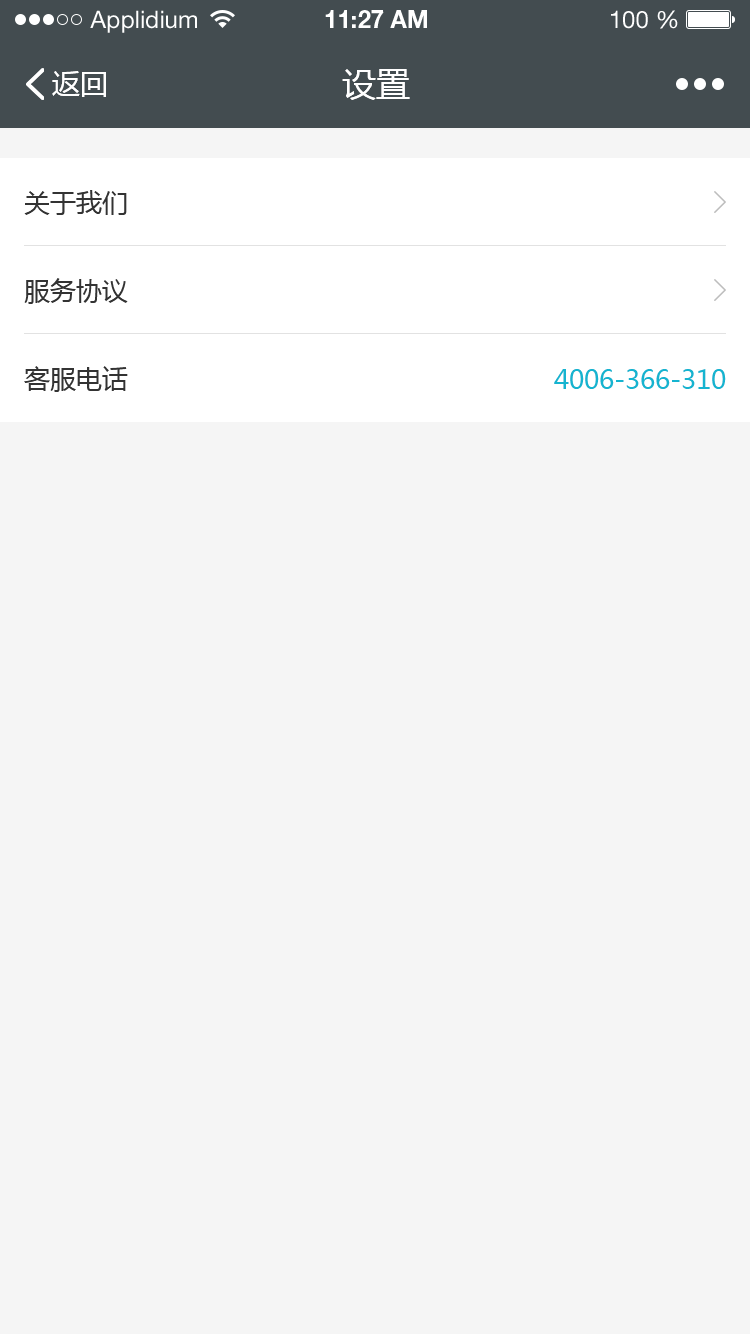
<style>
.page{position:relative;width:750px;height:1334px;background:#f5f5f5}
.page>*{position:absolute;margin:0}
.t1{font:24px "HelveticaNeueLTStd-Roman";color:#ffffff}
.t2{font:24px "HelveticaNeueLTStd-Bd";color:#ffffff}
.t3{font:28px "MicrosoftYaHei";color:#ffffff}
.t4{font:34px "MicrosoftYaHei";color:#ffffff}
.t5{font:26px "MicrosoftYaHei";color:#333333}
.t6{font:26px "MicrosoftYaHei";color:#15b4d0}
</style>
<div class="page">
<p class="t1" style="left:90px;top:10px;width:107px;height:23px">Applidium</p>
<p class="t2" style="left:325px;top:10px;width:102px;height:18px">11:27 AM</p>
<p class="t1" style="left:611px;top:10px;width:67px;height:19px">100 %</p>
<p class="t3" style="left:52px;top:71px;width:54px;height:26px">返回</p>
<p class="t4" style="left:342px;top:69px;width:68px;height:31px">设置</p>
<p class="t5" style="left:24px;top:190px;width:103px;height:25px">关于我们</p>
<p class="t5" style="left:24px;top:278px;width:104px;height:26px">服务协议</p>
<p class="t5" style="left:24px;top:366px;width:104px;height:26px">客服电话</p>
<p class="t6" style="left:554px;top:369px;width:172px;height:20px">4006-366-310</p>
</div>
